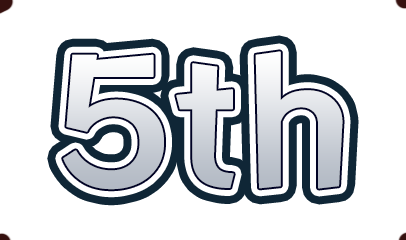
<style>
.page{position:relative;width:406px;height:240px;background:#ffffff}
.page>*{position:absolute;margin:0}
.t1{font:166.7px "RocknRollOne-Regular";font-weight:bold}
</style>
<div class="page">
<p class="t1" style="left:63px;top:51px;width:280px;height:139px">5th</p>
</div>
